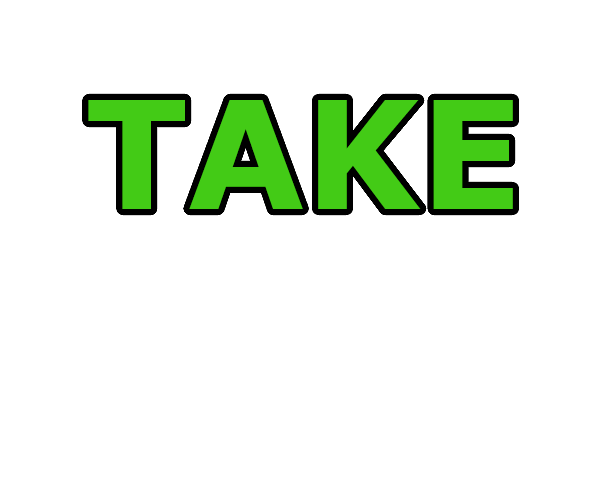
<style>
.page{position:relative;width:608px;height:490px;background:#ffffff}
.page>*{position:absolute;margin:0}
.t1{font:150px "Verdana-Bold";color:#43cb16}
</style>
<div class="page">
<p class="t1" style="left:88px;top:100px;width:425px;height:289px;text-align:center">TAKE<br>ALL</p>
</div>
